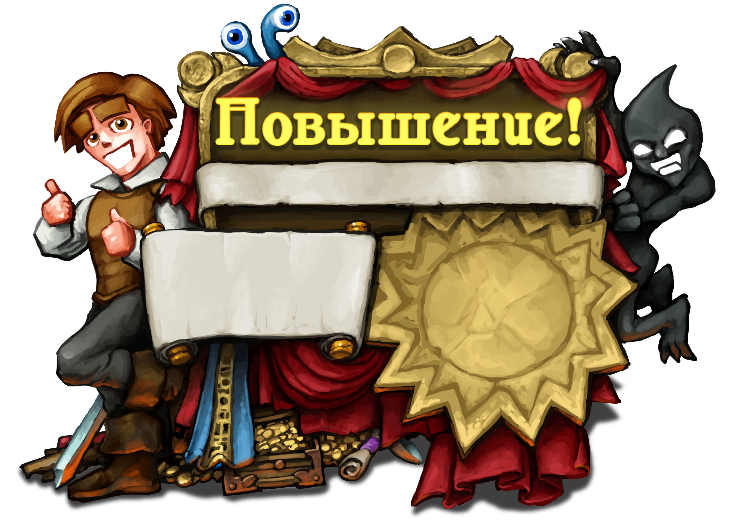
<style>
.page{position:relative;width:736px;height:528px;background:#ffffff}
.page>*{position:absolute;margin:0}
.t1{font:64.7px "Casanova";letter-spacing:0.03em;color:#fffd5f}
</style>
<div class="page">
<p class="t1" style="left:216px;top:98px;width:365px;height:47px">Повышение!</p>
</div>
